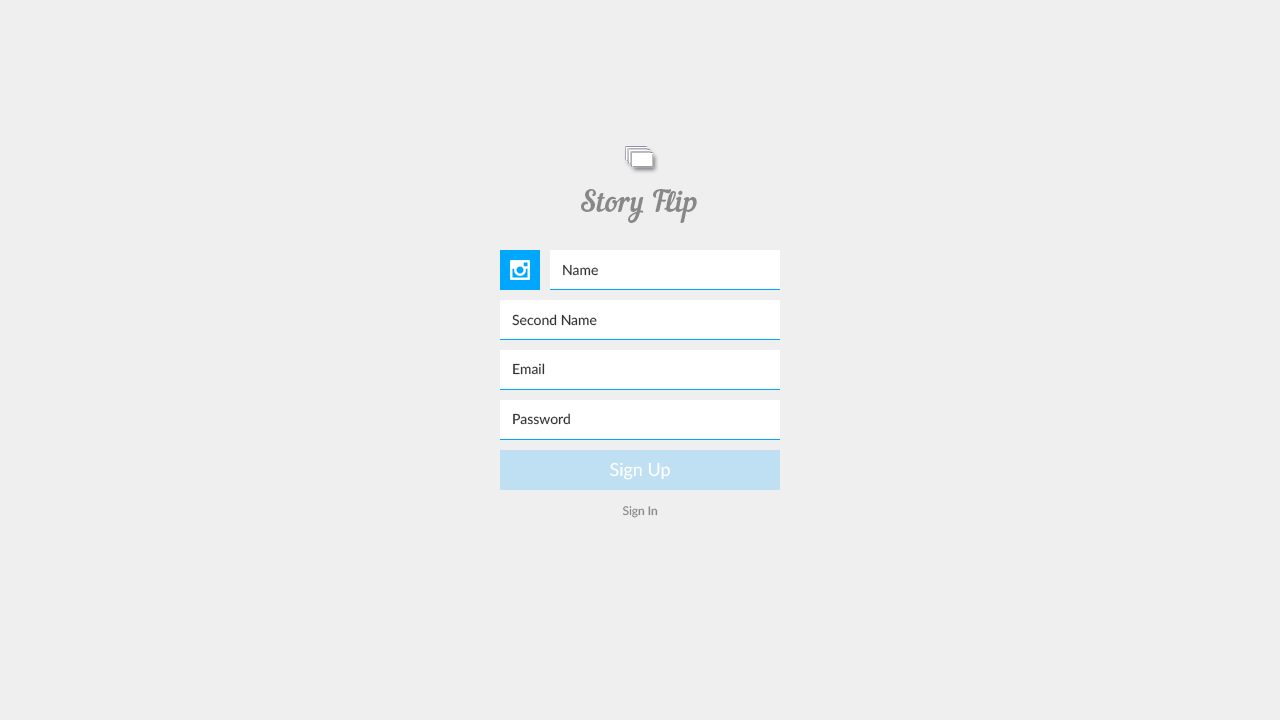
<style>
.page{position:relative;width:1280px;height:720px;background:#efefef}
.page>*{position:absolute;margin:0}
.t1{font:30px "NautilusPompilius";color:#888888}
.t2{font:14px "Lato-Regular";color:#333333}
.t3{font:18px "Lato-Regular";color:#ffffff}
.t4{font:12px "Lato-Regular";color:#888888}
</style>
<div class="page">
<p class="t1" style="left:581px;top:189px;width:116px;height:34px">Story Flip</p>
<p class="t2" style="left:563px;top:264px;width:35px;height:12px">Name</p>
<p class="t2" style="left:512px;top:314px;width:85px;height:12px">Second Name</p>
<p class="t2" style="left:513px;top:363px;width:32px;height:12px">Email</p>
<p class="t2" style="left:513px;top:413px;width:57px;height:12px">Password</p>
<p class="t3" style="left:610px;top:462px;width:60px;height:18px">Sign Up</p>
<p class="t4" style="left:622px;top:506px;width:36px;height:12px">Sign In</p>
</div>
